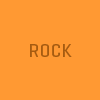
<style>
.page{position:relative;width:100px;height:100px;background:#ff9933}
.page>*{position:absolute;margin:0}
.t1{font:18px "Geogrotesque-Medium";letter-spacing:0.03em;color:#a65b10;text-transform:uppercase}
</style>
<div class="page">
<p class="t1" style="left:30px;top:44px;width:42px;height:13px">ROCK</p>
</div>
